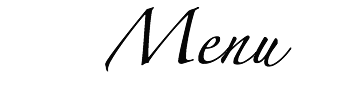
<style>
.page{position:relative;width:337px;height:98px;background:#ffffff}
.page>*{position:absolute;margin:0}
.t1{font:47.4px "Zapfino";color:#060606}
</style>
<div class="page">
<p class="t1" style="left:105px;top:7px;width:187px;height:65px">Menu</p>
</div>
